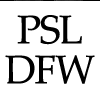
<style>
.page{position:relative;width:100px;height:100px;background:#ffffff}
.page>*{position:absolute;margin:0}
.t1{font:40px/40px "PalatinoLinotype-Roman";letter-spacing:-0.04em;color:#000000}
</style>
<div class="page">
<p class="t1" style="left:5px;top:14px;width:90px;height:69px;text-align:center">PSL<br>DFW</p>
</div>
